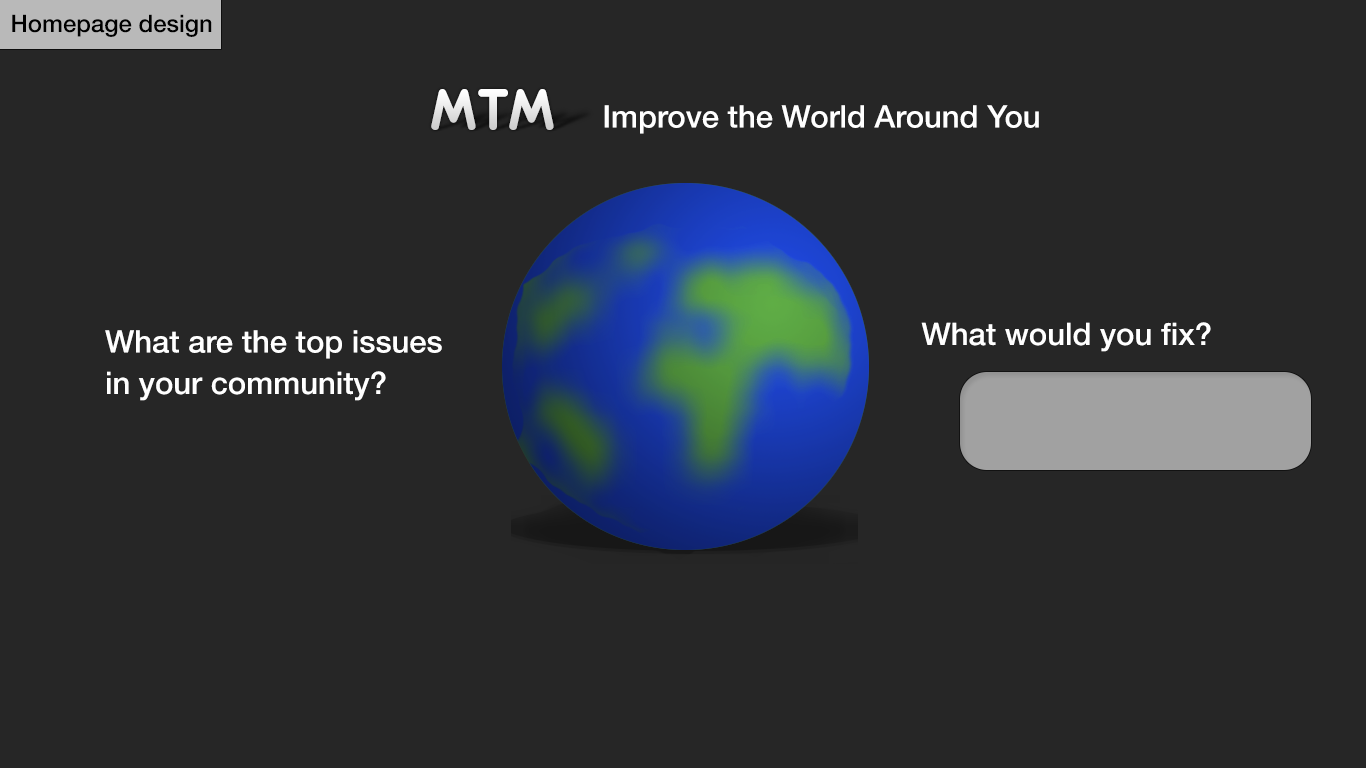
<style>
.page{position:relative;width:1366px;height:768px;background:#262626}
.page>*{position:absolute;margin:0}
.t1{font:24px "HelveticaNeue-Medium";color:#000000}
.t2{font:63px "Eurofurencebold";color:#e9e9e9}
.t3{font:31px "HelveticaNeue-Medium";color:#ffffff}
</style>
<div class="page">
<p class="t1" style="left:12px;top:14px;width:200px;height:23px">Homepage design</p>
<p class="t2" style="left:431px;top:89px;width:123px;height:41px">MTM</p>
<p class="t3" style="left:604px;top:105px;width:435px;height:29px">Improve the World Around You</p>
<p class="t3" style="left:921px;top:322px;width:290px;height:30px">What would you fix?</p>
<p class="t3" style="left:105px;top:330px;width:337px;height:71px">What are the top issues<br>in your community?</p>
</div>
